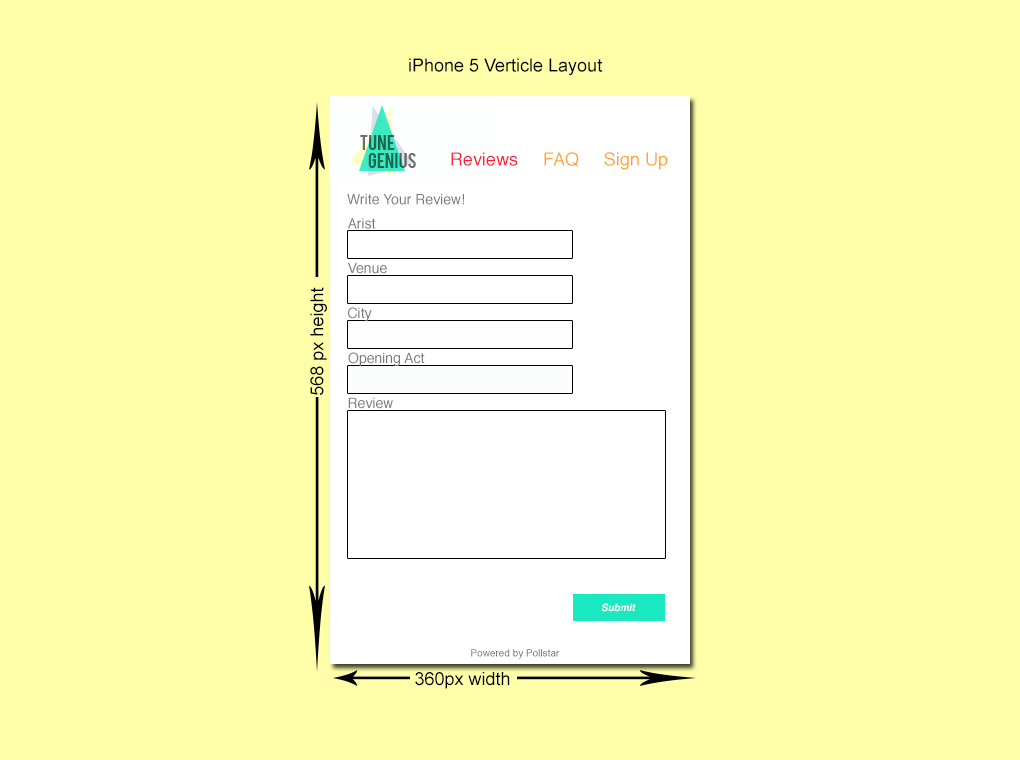
<style>
.page{position:relative;width:1020px;height:760px;background:#fffea9}
.page>*{position:absolute;margin:0}
.t1{font:18px "ArialMT";color:#000000}
.t2{font:16.6px "Bebas";color:#186552}
.t3{font:18px "Helvetica";color:#ffa42a}
.t4{font:18px "Helvetica";color:#ff1d36}
.t5{font:14px "Helvetica";color:#7b7b7b}
.t6{font:10px "Helvetica-BoldOblique";color:#ffffff}
.t7{font:10px "Helvetica";color:#7a7b7b}
</style>
<div class="page">
<p class="t1" style="left:409px;top:58px;width:194px;height:18px">iPhone 5 Verticle Layout</p>
<p class="t2" style="left:360px;top:135px;width:35px;height:15px">Tune</p>
<p class="t2" style="left:368px;top:153px;width:48px;height:15px">Genius</p>
<p class="t3" style="left:451px;top:152px;width:217px;height:18px"><span class="t4">Reviews     </span>FAQ     Sign Up</p>
<p class="t5" style="left:347px;top:194px;width:117px;height:11px">Write Your Review!</p>
<p class="t5" style="left:348px;top:218px;width:28px;height:11px">Arist</p>
<p class="t5" style="left:348px;top:262px;width:39px;height:12px">Venue</p>
<p class="t1" style="left:310px;top:287px;width:17px;height:108px;rotate:-90deg">568 px height</p>
<p class="t5" style="left:348px;top:307px;width:24px;height:14px">City</p>
<p class="t5" style="left:348px;top:352px;width:77px;height:14px">Opening Act</p>
<p class="t5" style="left:348px;top:397px;width:45px;height:12px">Review</p>
<p class="t6" style="left:601px;top:603px;width:35px;height:9px">Submit</p>
<p class="t7" style="left:471px;top:649px;width:88px;height:10px">Powered by Pollstar</p>
<p class="t1" style="left:415px;top:672px;width:95px;height:17px">360px width</p>
</div>
